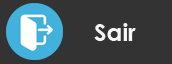
<style>
.page{position:relative;width:172px;height:64px;background:#333333}
.page>*{position:absolute;margin:0}
.t1{font:24px "CenturyGothic-Bold";color:#f5f5f5}
</style>
<div class="page">
<p class="t1" style="left:94px;top:23px;width:42px;height:18px">Sair</p>
</div>
